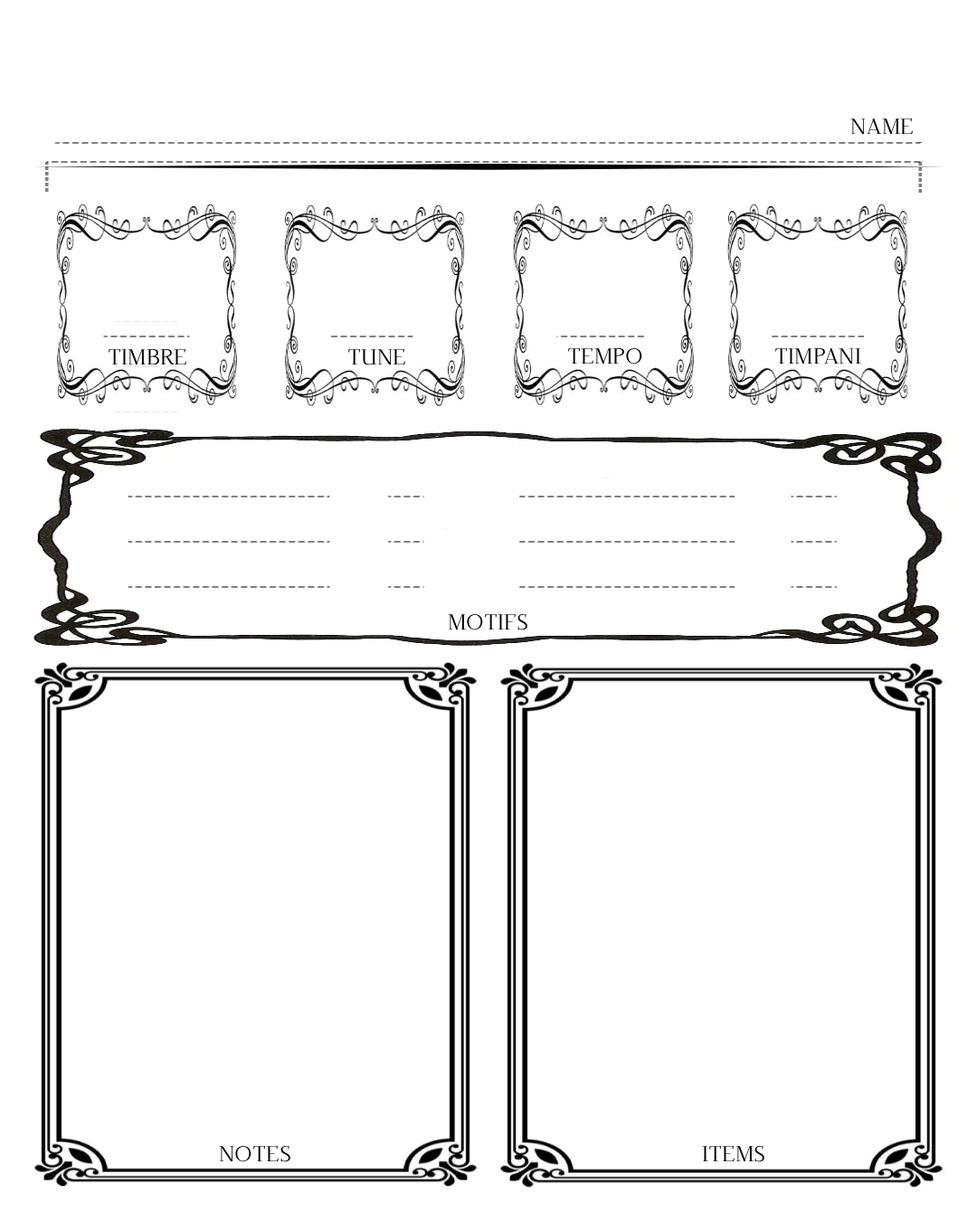
<style>
.page{position:relative;width:977px;height:1221px;background:#ffffff}
.page>*{position:absolute;margin:0}
.t1{font:21.7px "Dehuti-Book";color:#000000}
</style>
<div class="page">
<p class="t1" style="left:850px;top:118px;width:62px;height:17px">NAME</p>
<p class="t1" style="left:108px;top:348px;width:78px;height:17px">TIMBRE</p>
<p class="t1" style="left:347px;top:348px;width:58px;height:17px">TUNE</p>
<p class="t1" style="left:567px;top:347px;width:75px;height:17px">TEMPO</p>
<p class="t1" style="left:774px;top:347px;width:87px;height:17px">TIMPANI</p>
<p class="t1" style="left:448px;top:613px;width:79px;height:17px">MOTIFS</p>
<p class="t1" style="left:219px;top:1145px;width:71px;height:17px">NOTES</p>
<p class="t1" style="left:702px;top:1145px;width:62px;height:17px">ITEMS</p>
</div>
